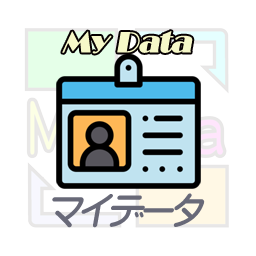
<style>
.page{position:relative;width:256px;height:256px;background:#ffffff}
.page>*{position:absolute;margin:0}
.t1{font:30px "Broadway";color:#f6f8c8;font-weight:bold;font-style:italic}
.t2{font:36px "YentiEGP-Extra-SJIS";color:#686978;font-style:italic}
</style>
<div class="page">
<p class="t1" style="left:62px;top:31px;width:131px;height:23px">My Data</p>
<p class="t2" style="left:52px;top:193px;width:153px;height:35px">マイデータ</p>
</div>
